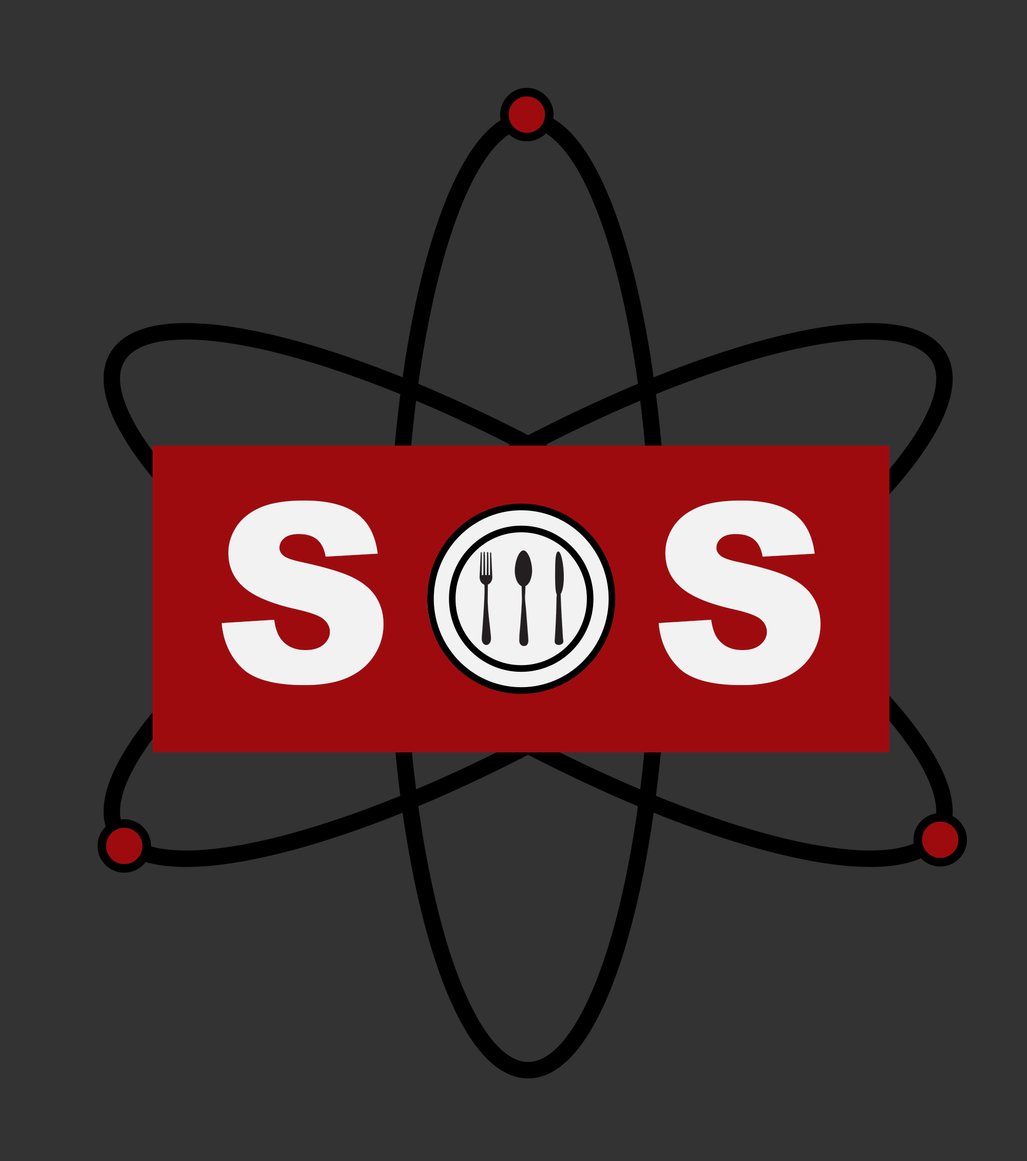
<style>
.page{position:relative;width:1027px;height:1161px;background:#333333}
.page>*{position:absolute;margin:0}
.t1{font:249.2px "Arial-Black";color:#f2f2f2}
</style>
<div class="page">
<p class="t1" style="left:221px;top:500px;width:163px;height:185px">S</p>
<p class="t1" style="left:659px;top:500px;width:162px;height:185px">S</p>
</div>
